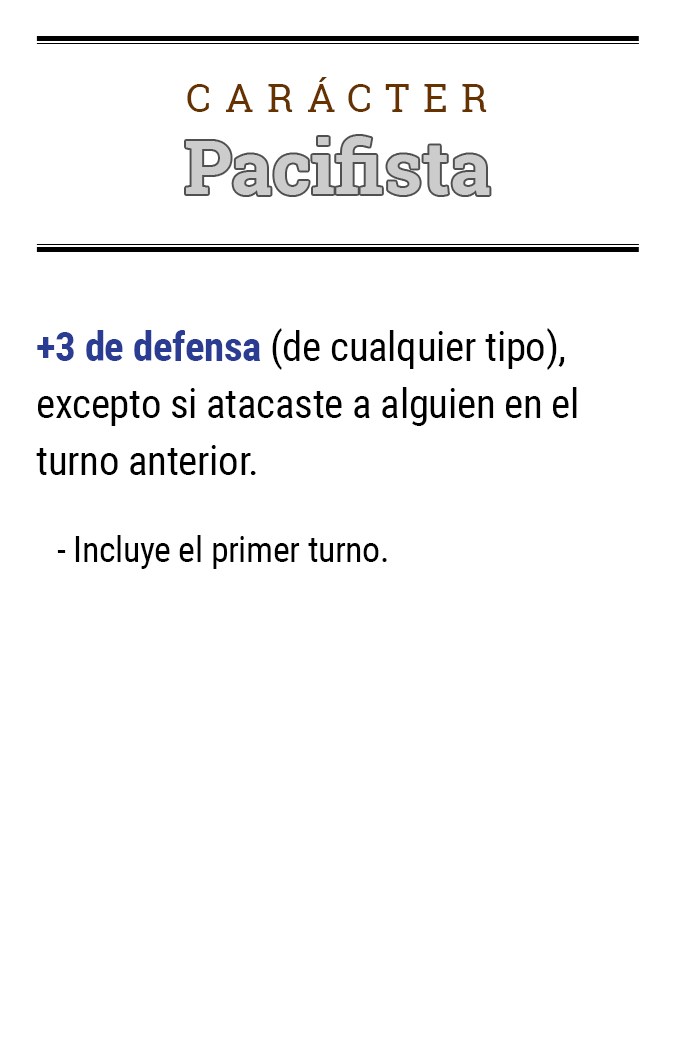
<style>
.page{position:relative;width:675px;height:1050px;background:#ffffff}
.page>*{position:absolute;margin:0}
.t1{font:39.2px "RobotoSlab-Regular";letter-spacing:0.34em;color:#663300}
.t2{font:41.1px/57.1px "RobotoCondensed-Regular";letter-spacing:-0.01em;color:#000000}
.t3{font:41.1px/57.1px "RobotoCondensed-Bold";letter-spacing:-0.01em;color:#2a3d93}
.t4{font:35.8px/45.8px "RobotoCondensed-Regular";letter-spacing:-0.01em;color:#000000}
</style>
<div class="page">
<p class="t1" style="left:187px;top:77px;width:300px;height:35px">CARÁCTER</p>
<p class="t2" style="left:36px;top:328px;width:541px;height:241px"><span class="t3">+3 de defensa</span> (de cualquier tipo), excepto si atacaste a alguien en el turno anterior.<br><br><span class="t4">- Incluye el primer turno.</span></p>
</div>
